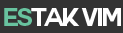
<style>
.page{position:relative;width:123px;height:33px;background:#333333}
.page>*{position:absolute;margin:0}
.t1{font:25px "Couture-Bold";letter-spacing:-0.1em;color:#ffffff}
.t2{font:25px "Couture-Bold";letter-spacing:-0.1em;color:#68c39f}
</style>
<div class="page">
<p class="t1" style="left:4px;top:8px;width:117px;height:18px"><span class="t2">es</span>tak VIM</p>
</div>
